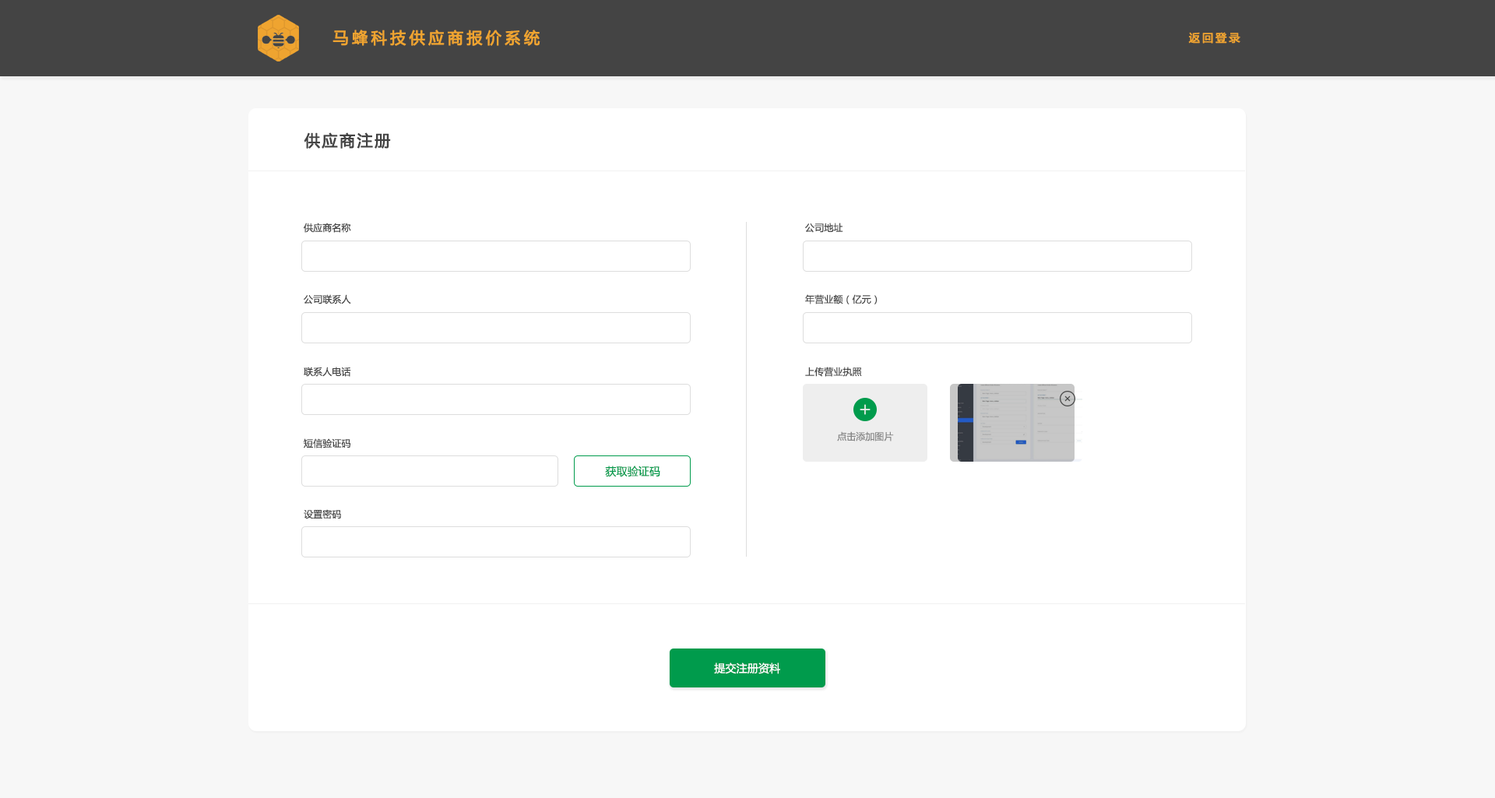
<style>
.page{position:relative;width:1495px;height:798px;background:#ffffff}
.page>*{position:absolute;margin:0}
.t1{font:15.6px "MicrosoftYaHei";letter-spacing:0.2em;color:#efa430;font-weight:bold}
.t2{font:10.9px "MicrosoftYaHei";letter-spacing:0.2em;color:#efa430;font-weight:bold}
.t3{font:15.6px "MicrosoftYaHei";letter-spacing:0.1em;color:#444444;font-weight:bold}
.t4{font:9.3px "MicrosoftYaHei";letter-spacing:0.01em;color:#444444}
.t5{font:9.3px "MicrosoftYaHei";color:#888888}
.t6{font:10.9px "MicrosoftYaHei";letter-spacing:0.01em;color:#009b4c}
.t7{font:10.9px "MicrosoftYaHei";letter-spacing:0.01em;color:#ffffff}
</style>
<div class="page">
<p class="t1" style="left:332px;top:30px;width:208px;height:16px">马蜂科技供应商报价系统</p>
<p class="t2" style="left:1188px;top:32px;width:52px;height:12px">返回登录</p>
<p class="t3" style="left:304px;top:132px;width:87px;height:17px">供应商注册</p>
<p class="t4" style="left:304px;top:223px;width:47px;height:10px">供应商名称</p>
<p class="t4" style="left:805px;top:223px;width:38px;height:10px">公司地址</p>
<p class="t4" style="left:304px;top:294px;width:47px;height:10px">公司联系人</p>
<p class="t4" style="left:805px;top:294px;width:72px;height:10px">年营业额（亿元）</p>
<p class="t4" style="left:304px;top:367px;width:47px;height:10px">联系人电话</p>
<p class="t4" style="left:805px;top:367px;width:57px;height:10px">上传营业执照</p>
<p class="t5" style="left:837px;top:431px;width:57px;height:10px">点击添加图片</p>
<p class="t4" style="left:304px;top:438px;width:46px;height:10px">短信验证码</p>
<p class="t6" style="left:605px;top:465px;width:55px;height:12px">获取验证码</p>
<p class="t4" style="left:304px;top:509px;width:37px;height:10px">设置密码</p>
<p class="t7" style="left:714px;top:662px;width:66px;height:12px">提交注册资料</p>
</div>
